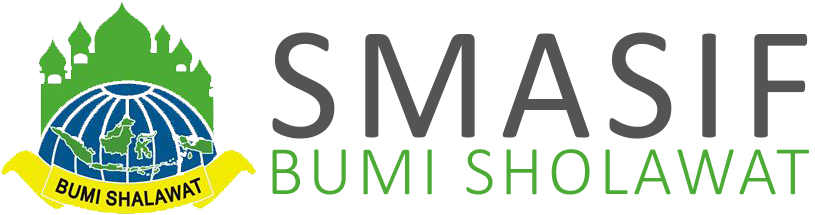
<style>
.page{position:relative;width:815px;height:215px;background:#ffffff}
.page>*{position:absolute;margin:0}
.t1{font:163.1px "Calibri";letter-spacing:0.075em;color:#545454}
.t2{font:70.1px "Calibri-Light";letter-spacing:0.075em;color:#4cab35}
</style>
<div class="page">
<p class="t1" style="left:272px;top:32px;width:536px;height:107px">SMASIF</p>
<p class="t2" style="left:272px;top:149px;width:537px;height:46px">BUMI SHOLAWAT</p>
</div>
